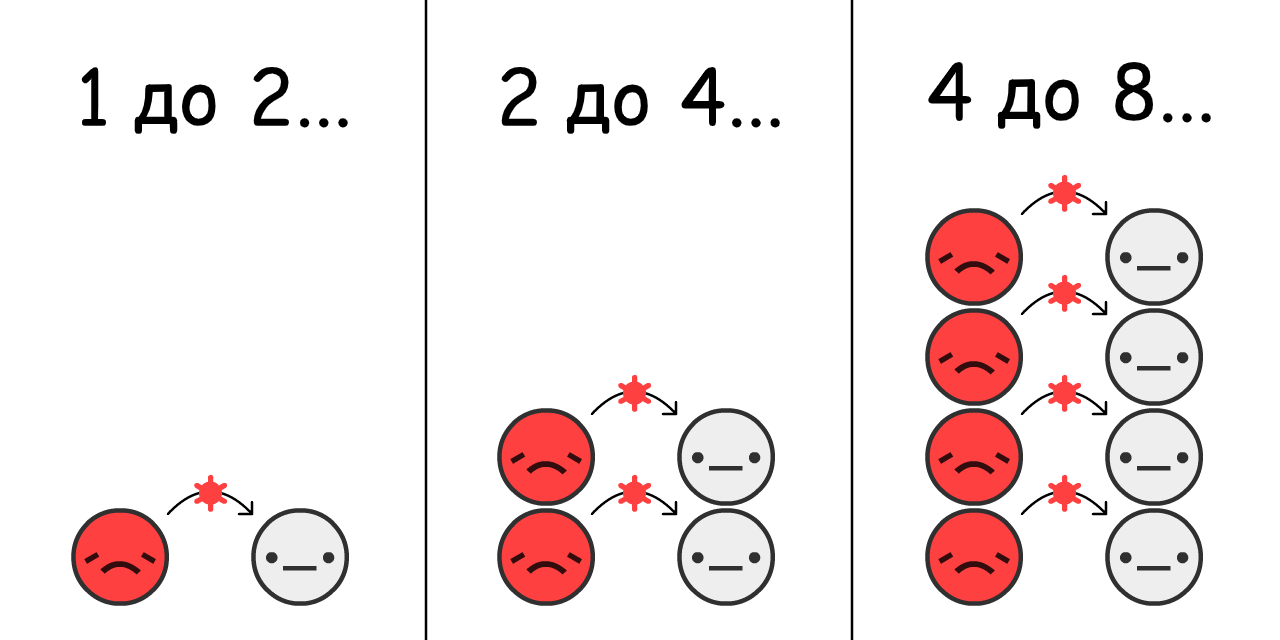
<style>
.page{position:relative;width:1280px;height:640px;background:#ffffff}
.page>*{position:absolute;margin:0}
.t1{font:77px "ComicRelief";color:#000000}
</style>
<div class="page">
<p class="t1" style="left:928px;top:62px;width:283px;height:67px">4 до 8...</p>
<p class="t1" style="left:80px;top:66px;width:268px;height:68px">1 до 2...</p>
<p class="t1" style="left:500px;top:66px;width:280px;height:68px">2 до 4...</p>
</div>
